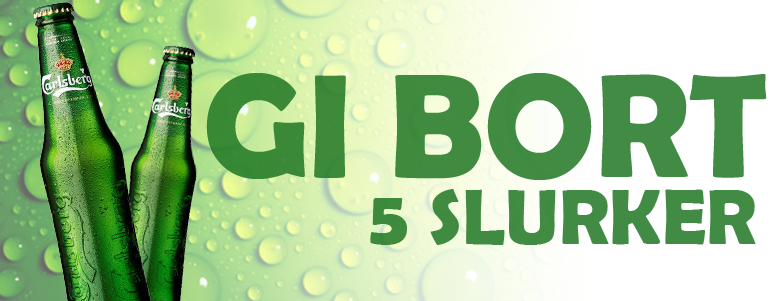
<style>
.page{position:relative;width:780px;height:301px}
.page>*{position:absolute;margin:0}
.t1{font:148px "BerlinSansFBDemi-Bold";color:#408b42}
.t2{font:79.4px "BerlinSansFBDemi-Bold";color:#418b45}
</style>
<div class="page">
<p class="t1" style="left:206px;top:73px;width:561px;height:107px">GI BORT</p>
<p class="t2" style="left:370px;top:189px;width:386px;height:56px">5 SLURKER</p>
</div>
